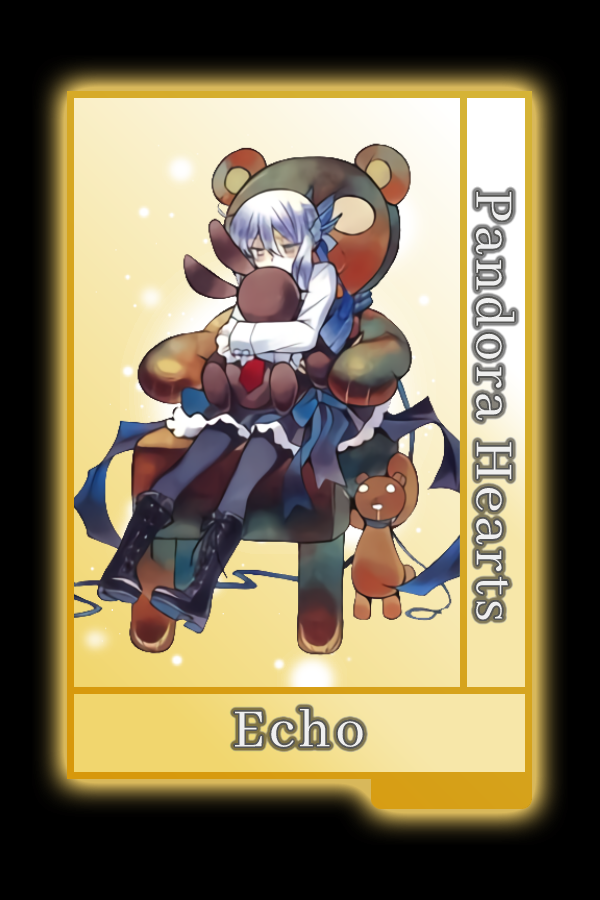
<style>
.page{position:relative;width:600px;height:900px;background:#000000}
.page>*{position:absolute;margin:0}
.t1{font:59.1px "AbhayaLibre-Regular";letter-spacing:0.072em;color:#efefef}
.t2{font:59px "AbhayaLibre-Regular";letter-spacing:0.072em;color:#efefef}
</style>
<div class="page">
<p class="t1" style="left:476px;top:192px;width:39px;height:428px;rotate:90deg">Pandora Hearts</p>
<p class="t2" style="left:234px;top:708px;width:129px;height:39px">Echo</p>
</div>
